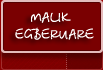
<style>
.page{position:relative;width:103px;height:70px;background:#7a0001}
.page>*{position:absolute;margin:0}
.t1{font:14px "BetinaScript";color:#ffffff}
.t2{font:11px "Tahoma";color:#ffffff}
</style>
<div class="page">
<p class="t1" style="left:15px;top:12px;width:79px;height:28px"><span class="t2">   </span> MALIK<br>EGBERUARE</p>
</div>
